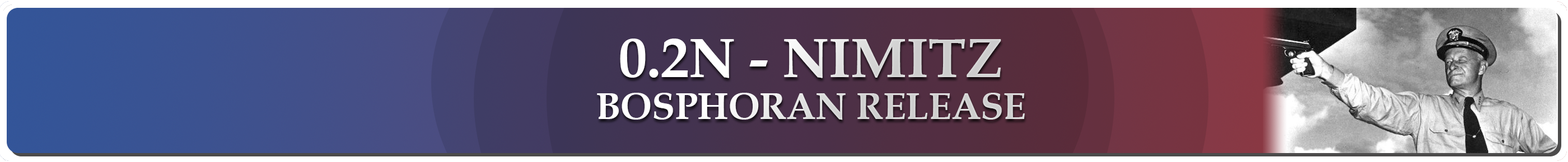
<style>
.page{position:relative;width:1568px;height:162px}
.page>*{position:absolute;margin:0}
.t1{font:37.3px/42px "BookAntiqua-Bold"}
.t2{font:56px "BookAntiqua-Bold"}
</style>
<div class="page">
<p class="t1" style="left:597px;top:39px;width:428px;height:81px;text-align:center"><span class="t2">0.2N - NIMITZ<br></span>BOSPHORAN RELEASE</p>
</div>
